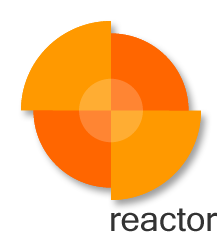
<style>
.page{position:relative;width:222px;height:236px;background:#ffffff}
.page>*{position:absolute;margin:0}
.t1{font:55px "Kartika";color:#333333}
</style>
<div class="page">
<p class="t1" style="left:111px;top:208px;width:106px;height:24px">reactor</p>
</div>
